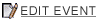
<style>
.page{position:relative;width:99px;height:20px;background:#ffffff}
.page>*{position:absolute;margin:0}
.t1{font:12px "ArialMT";letter-spacing:0.05em;color:#333333;text-transform:uppercase}
</style>
<div class="page">
<p class="t1" style="left:21px;top:6px;width:75px;height:9px">Edit Event</p>
</div>
